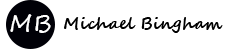
<style>
.page{position:relative;width:230px;height:49px;background:#ffffff}
.page>*{position:absolute;margin:0}
.t1{font:24.5px "SegoeScript";color:#ffffff}
.t2{font:16.3px "SegoeScript-Bold";color:#000000}
</style>
<div class="page">
<p class="t1" style="left:10px;top:14px;width:41px;height:19px">MB</p>
<p class="t2" style="left:64px;top:17px;width:159px;height:16px">Michael Bingham</p>
</div>
